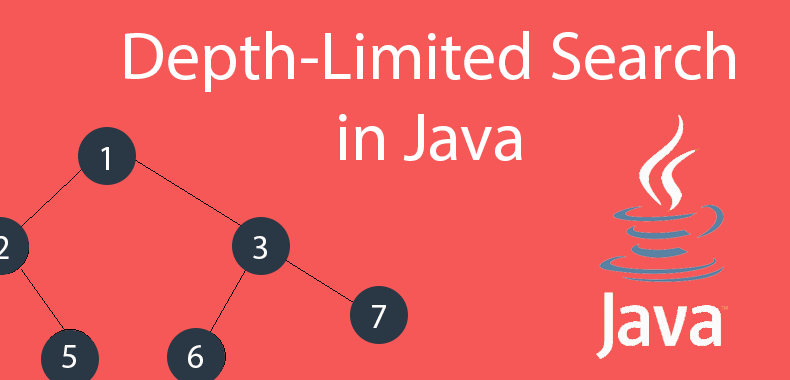
<style>
.page{position:relative;width:790px;height:380px;background:#f55856}
.page>*{position:absolute;margin:0}
.t1{font:68px "MyriadPro-Regular";color:#ffffff}
.t2{font:34px "MyriadPro-Regular";color:#ffffff}
</style>
<div class="page">
<p class="t1" style="left:125px;top:31px;width:610px;height:130px;text-align:center">Depth-Limited Search in Java</p>
<p class="t2" style="left:101px;top:147px;width:8px;height:23px">1</p>
<p class="t2" style="left:253px;top:236px;width:14px;height:23px">3</p>
<p class="t2" style="left:372px;top:305px;width:14px;height:23px">7</p>
<p class="t2" style="left:62px;top:345px;width:14px;height:23px">5</p>
<p class="t2" style="left:188px;top:345px;width:15px;height:23px">6</p>
</div>
